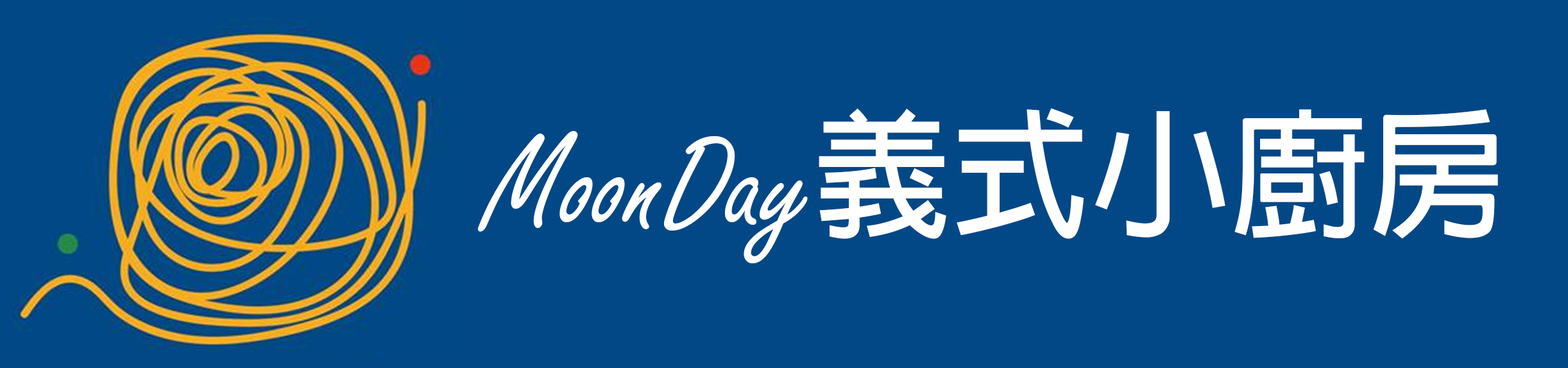
<style>
.page{position:relative;width:1568px;height:368px;background:#024886}
.page>*{position:absolute;margin:0}
.t1{font:139.2px "FreestyleScript-Regular";color:#ffffff}
.t2{font:139.2px "AdobeFanHeitiStd-Bold";color:#ffffff}
</style>
<div class="page">
<p class="t1" style="left:477px;top:108px;width:1021px;height:155px">MoonDay<span class="t2">義式小廚房</span></p>
</div>
